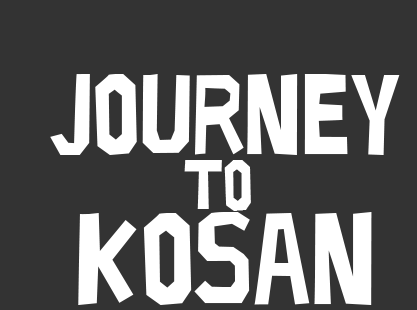
<style>
.page{position:relative;width:417px;height:310px;background:#333333}
.page>*{position:absolute;margin:0}
.t1{font:114.4px/75px "LIMBO";color:#ffffff}
.t2{font:130.4px/75px "LIMBO";color:#ffffff}
.t3{font:71.7px "LIMBO";color:#ffffff}
</style>
<div class="page">
<p class="t1" style="left:50px;top:74px;width:350px;height:231px;text-align:center">Journey<br><br><span class="t2">kosan</span></p>
<p class="t3" style="left:184px;top:160px;width:67px;height:51px">to</p>
</div>
